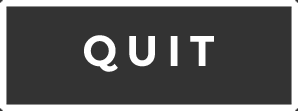
<style>
.page{position:relative;width:298px;height:111px;background:#333333}
.page>*{position:absolute;margin:0}
.t1{font:42.9px "Montserrat-Bold";letter-spacing:0.2em;color:#ffffff;text-transform:uppercase}
</style>
<div class="page">
<p class="t1" style="left:84px;top:35px;width:130px;height:37px">QUIT</p>
</div>
